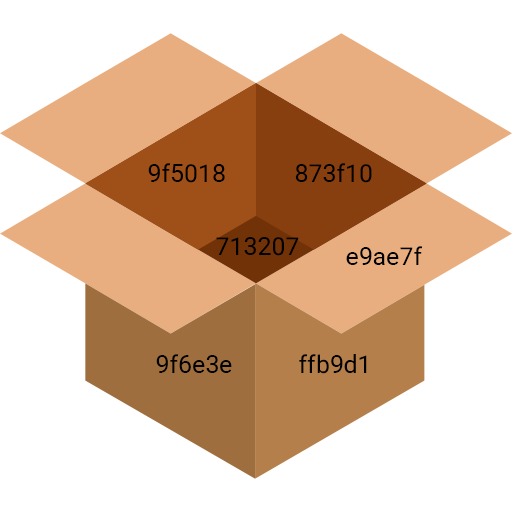
<style>
.page{position:relative;width:512px;height:512px;background:#ffffff}
.page>*{position:absolute;margin:0}
.t1{font:24.8px "Roboto-Regular";color:#000000}
</style>
<div class="page">
<p class="t1" style="left:148px;top:163px;width:77px;height:20px">9f5018</p>
<p class="t1" style="left:295px;top:163px;width:77px;height:20px">873f10</p>
<p class="t1" style="left:216px;top:237px;width:83px;height:19px">713207</p>
<p class="t1" style="left:346px;top:246px;width:77px;height:19px">e9ae7f</p>
<p class="t1" style="left:156px;top:354px;width:76px;height:19px">9f6e3e</p>
<p class="t1" style="left:299px;top:354px;width:68px;height:20px">ffb9d1</p>
</div>
